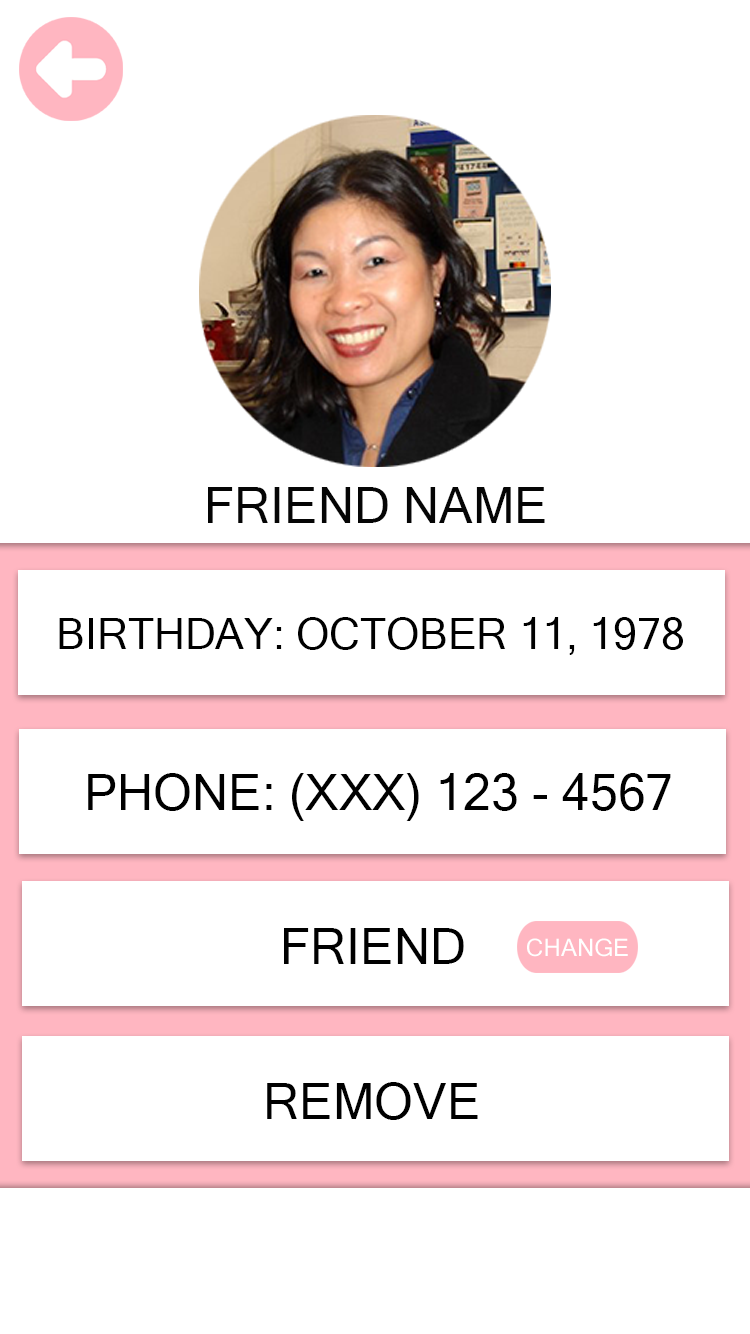
<style>
.page{position:relative;width:750px;height:1334px;background:#ffffff}
.page>*{position:absolute;margin:0}
.t1{font:50px "MicrosoftSansSerif";color:#050505}
.t2{font:42.8px "MicrosoftSansSerif";color:#000000}
.t3{font:50px "MicrosoftSansSerif";color:#000000}
.t4{font:24.2px "MicrosoftSansSerif";color:#ffffff}
</style>
<div class="page">
<p class="t1" style="left:208px;top:487px;width:337px;height:36px">FRIEND NAME</p>
<p class="t2" style="left:59px;top:617px;width:624px;height:38px">BIRTHDAY: OCTOBER 11, 1978</p>
<p class="t3" style="left:88px;top:773px;width:583px;height:48px">PHONE: (XXX) 123 - 4567</p>
<p class="t3" style="left:284px;top:928px;width:180px;height:36px">FRIEND</p>
<p class="t4" style="left:527px;top:938px;width:101px;height:19px">CHANGE</p>
<p class="t3" style="left:267px;top:1082px;width:211px;height:38px">REMOVE</p>
</div>
